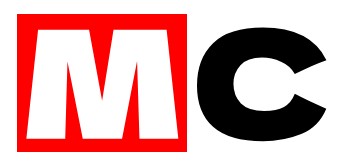
<style>
.page{position:relative;width:344px;height:160px;background:#ffffff}
.page>*{position:absolute;margin:0}
.t1{font:150px "DelaGothicOne-Regular";color:#ffffff}
.t2{font:150px "DelaGothicOne-Regular";color:#000000}
</style>
<div class="page">
<p class="t1" style="left:26px;top:29px;width:153px;height:110px">M</p>
<p class="t2" style="left:197px;top:27px;width:130px;height:115px">C</p>
</div>
